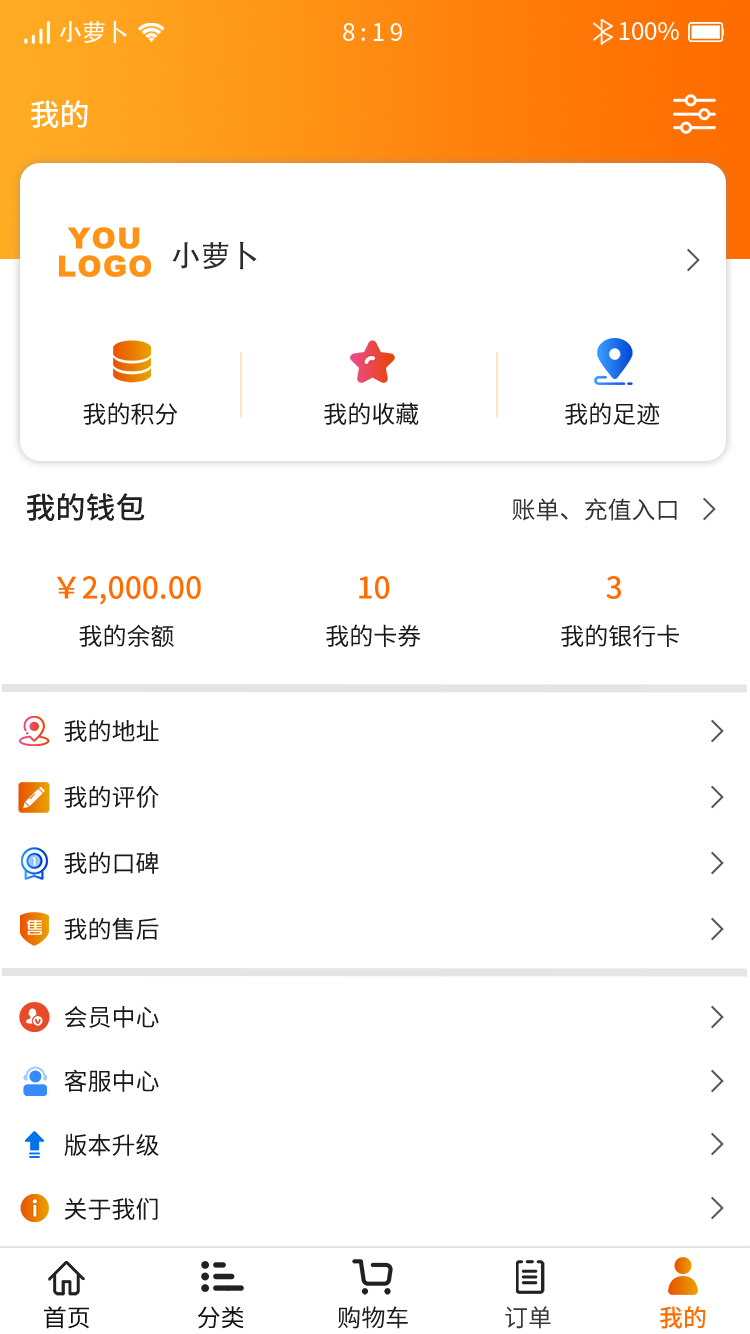
<style>
.page{position:relative;width:750px;height:1334px;background:#ffffff}
.page>*{position:absolute;margin:0}
.t1{font:24px "AdobeHeitiStd-Regular";color:#ffffff}
.t2{font:24px "SourceHanSansCN-Regular";letter-spacing:0.2em;color:#ffffff}
.t3{font:24px "SourceHanSansCN-Regular";color:#ffffff}
.t4{font:30px "SourceHanSansCN-Medium";color:#ffffff}
.t5{font:30px "AdobeHeitiStd-Regular";color:#2c2c2c}
.t6{font:24.1px "SourceHanSansCN-Regular";color:#1a1a1a}
.t7{font:30px "SourceHanSansCN-Medium";color:#212121}
.t8{font:24px "SourceHanSansCN-Regular";color:#333333}
.t9{font:30px "SourceHanSansCN-Medium";color:#ff6d01}
.t10{font:24px "SourceHanSansCN-Regular";color:#1a1919}
.t11{font:24.2px "SourceHanSansCN-Regular";color:#0f0f0f}
.t12{font:24.2px "SourceHanSansCN-Regular";color:#121212}
.t13{font:24.2px "SourceHanSansCN-Regular";color:#1f1e1d}
.t14{font:24.2px "SourceHanSansCN-Regular";color:#393939}
.t15{font:24.2px "SourceHanSansCN-Medium";color:#ff6d01}
</style>
<div class="page">
<p class="t1" style="left:59px;top:21px;width:68px;height:22px">小萝卜</p>
<p class="t2" style="left:343px;top:23px;width:59px;height:18px">8:19</p>
<p class="t3" style="left:619px;top:22px;width:60px;height:18px">100%</p>
<p class="t4" style="left:30px;top:100px;width:58px;height:28px">我的</p>
<p class="t5" style="left:172px;top:241px;width:85px;height:29px">小萝卜</p>
<p class="t6" style="left:83px;top:402px;width:95px;height:23px">我的积分</p>
<p class="t6" style="left:324px;top:402px;width:95px;height:23px">我的收藏</p>
<p class="t6" style="left:565px;top:402px;width:95px;height:23px">我的足迹</p>
<p class="t7" style="left:26px;top:493px;width:119px;height:28px">我的钱包</p>
<p class="t8" style="left:512px;top:498px;width:165px;height:23px">账单、充值入口</p>
<p class="t9" style="left:56px;top:576px;width:145px;height:29px">￥2,000.00</p>
<p class="t9" style="left:359px;top:576px;width:31px;height:23px">10</p>
<p class="t9" style="left:606px;top:576px;width:15px;height:23px">3</p>
<p class="t6" style="left:79px;top:624px;width:95px;height:23px">我的余额</p>
<p class="t6" style="left:326px;top:624px;width:95px;height:23px">我的卡券</p>
<p class="t6" style="left:561px;top:624px;width:118px;height:23px">我的银行卡</p>
<p class="t10" style="left:64px;top:719px;width:95px;height:23px">我的地址</p>
<p class="t10" style="left:64px;top:785px;width:95px;height:23px">我的评价</p>
<p class="t10" style="left:64px;top:851px;width:95px;height:23px">我的口碑</p>
<p class="t10" style="left:64px;top:917px;width:95px;height:23px">我的售后</p>
<p class="t10" style="left:64px;top:1006px;width:95px;height:22px">会员中心</p>
<p class="t10" style="left:64px;top:1069px;width:95px;height:23px">客服中心</p>
<p class="t10" style="left:64px;top:1133px;width:95px;height:23px">版本升级</p>
<p class="t10" style="left:64px;top:1198px;width:94px;height:22px">关于我们</p>
<p class="t11" style="left:44px;top:1306px;width:45px;height:23px">首页</p>
<p class="t12" style="left:197px;top:1306px;width:47px;height:23px">分类</p>
<p class="t13" style="left:338px;top:1306px;width:70px;height:23px">购物车</p>
<p class="t14" style="left:505px;top:1306px;width:46px;height:23px">订单</p>
<p class="t15" style="left:660px;top:1306px;width:46px;height:23px">我的</p>
</div>
